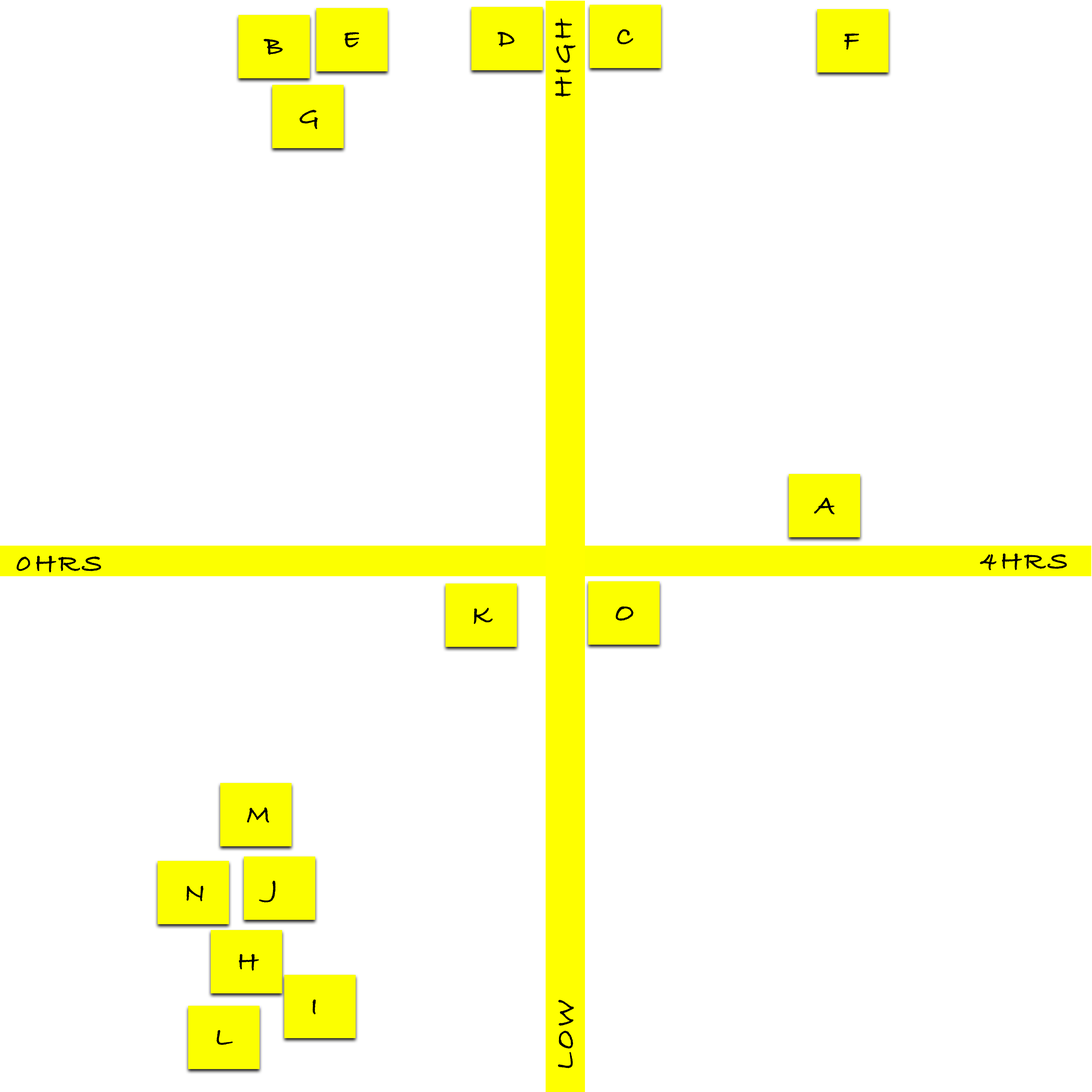
<style>
.page{position:relative;width:1092px;height:1092px;background:#ffffff}
.page>*{position:absolute;margin:0}
.t1{font:27.6px "BradleyHandITCTT-Bold";letter-spacing:0.12em;color:#000000;text-transform:uppercase}
</style>
<div class="page">
<p class="t1" style="left:555px;top:18px;width:20px;height:79px;rotate:-90deg">high</p>
<p class="t1" style="left:617px;top:29px;width:16px;height:15px">C</p>
<p class="t1" style="left:264px;top:39px;width:19px;height:16px">B</p>
<p class="t1" style="left:344px;top:32px;width:15px;height:16px">E</p>
<p class="t1" style="left:497px;top:32px;width:18px;height:15px">D</p>
<p class="t1" style="left:844px;top:33px;width:15px;height:17px">F</p>
<p class="t1" style="left:299px;top:110px;width:19px;height:19px">G</p>
<p class="t1" style="left:814px;top:497px;width:21px;height:18px">A</p>
<p class="t1" style="left:16px;top:555px;width:85px;height:18px">0HRS</p>
<p class="t1" style="left:980px;top:553px;width:87px;height:17px">4hrs</p>
<p class="t1" style="left:474px;top:608px;width:19px;height:16px">K</p>
<p class="t1" style="left:616px;top:606px;width:18px;height:15px">O</p>
<p class="t1" style="left:247px;top:807px;width:22px;height:16px">M</p>
<p class="t1" style="left:259px;top:881px;width:17px;height:22px">J</p>
<p class="t1" style="left:186px;top:886px;width:17px;height:15px">N</p>
<p class="t1" style="left:239px;top:954px;width:20px;height:17px">H</p>
<p class="t1" style="left:312px;top:999px;width:4px;height:15px">I</p>
<p class="t1" style="left:558px;top:1000px;width:16px;height:68px;rotate:-90deg">low</p>
<p class="t1" style="left:216px;top:1030px;width:17px;height:15px">L</p>
</div>
